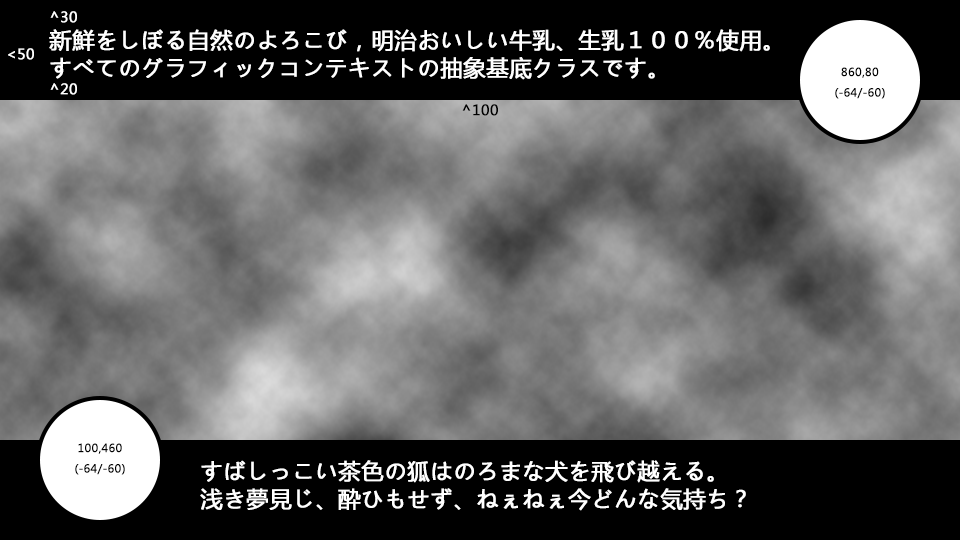
<style>
.page{position:relative;width:960px;height:540px;background:#000000}
.page>*{position:absolute;margin:0}
.t1{font:13.9px "MicrosoftYaHei";color:#ffffff;font-weight:bold}
.t2{font:22.2px/27.8px "MicrosoftYaHei";color:#ffffff;font-weight:bold}
.t3{font:11.1px/20.5px "MicrosoftYaHei";color:#000000;font-weight:bold}
.t4{font:13.9px "MicrosoftYaHei";color:#000000;font-weight:bold}
</style>
<div class="page">
<p class="t1" style="left:50px;top:11px;width:27px;height:12px">^30</p>
<p class="t2" style="left:49px;top:29px;width:721px;height:51px">新鮮をしぼる自然のよろこび，明治おいしい牛乳、生乳１００％使用。<br>すべてのグラフィックコンテキストの抽象基底クラスです。</p>
<p class="t1" style="left:8px;top:48px;width:26px;height:12px">&lt;50</p>
<p class="t3" style="left:835px;top:67px;width:50px;height:32px;text-align:center">860,80<br>(-64/-60)</p>
<p class="t1" style="left:50px;top:83px;width:27px;height:12px">^20</p>
<p class="t4" style="left:462px;top:104px;width:36px;height:12px">^100</p>
<p class="t3" style="left:75px;top:443px;width:50px;height:32px;text-align:center">100,460<br>(-64/-60)</p>
<p class="t2" style="left:200px;top:460px;width:546px;height:51px">すばしっこい茶色の狐はのろまな犬を飛び越える。<br>浅き夢見じ、酔ひもせず、ねぇねぇ今どんな気持ち？</p>
</div>
